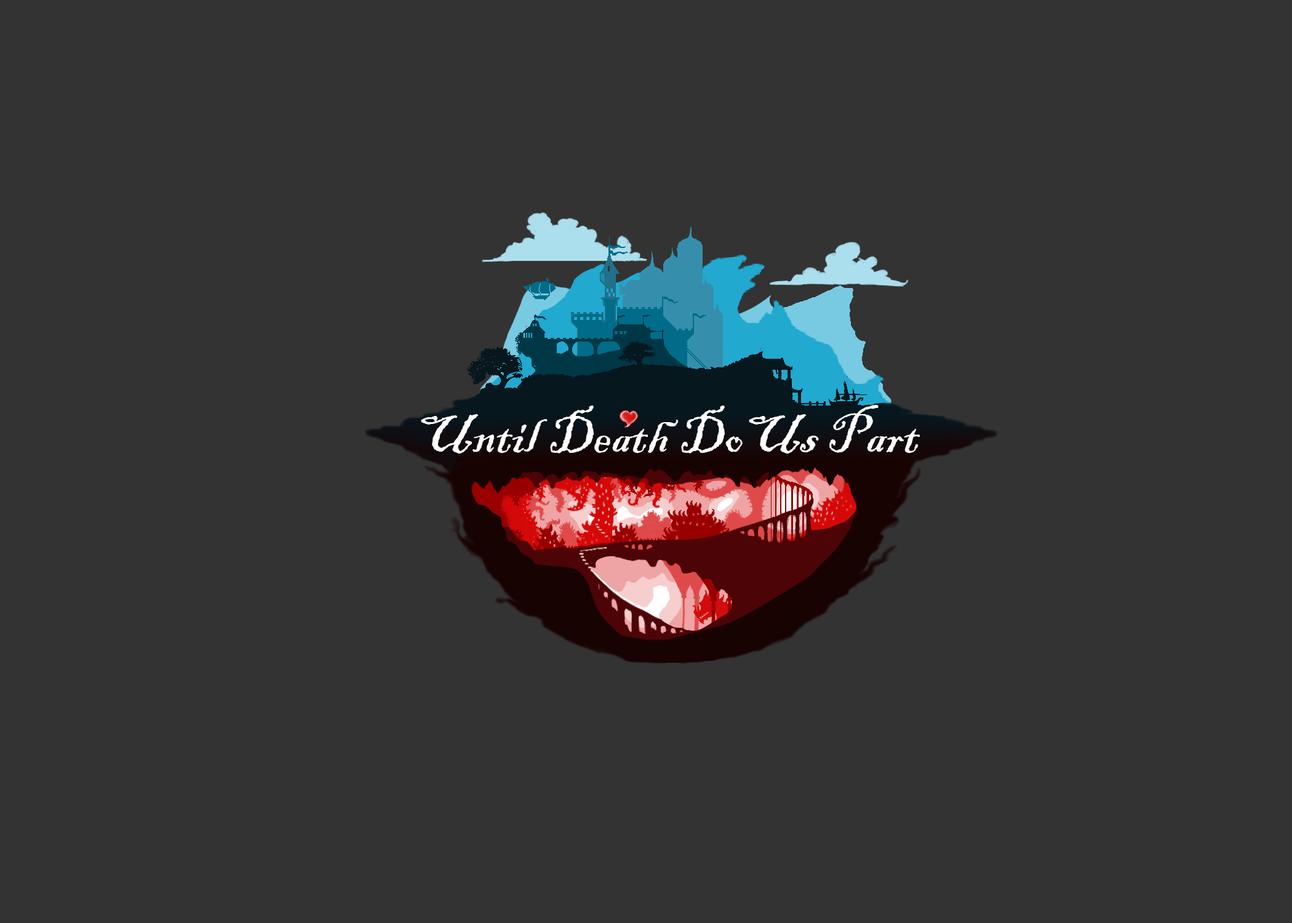
<style>
.page{position:relative;width:1292px;height:923px;background:#333333}
.page>*{position:absolute;margin:0}
.t1{font:56.4px "BlackadderITC-Regular";color:#ffffff}
</style>
<div class="page">
<p class="t1" style="left:421px;top:405px;width:499px;height:48px">Until Death DoUs Part</p>
</div>
